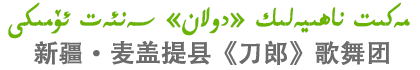
<style>
.page{position:relative;width:420px;height:70px;background:#ffffff}
.page>*{position:absolute;margin:0}
.t1{font:37px "UKIJKesme";color:#6ab401;font-weight:bold;scale:0.94 1}
.t2{font:25px "AdobeHeitiStd-Regular";color:#6b6b6b;font-weight:bold}
</style>
<div class="page">
<p class="t1" style="left:8px;top:2px;width:402px;height:37px">مەكىت ناھىيەلىك «دولان» سەنئەت ئۆمىكى</p>
<p class="t2" style="left:34px;top:40px;width:355px;height:25px">新疆·麦盖提县《刀郎》歌舞团</p>
</div>
